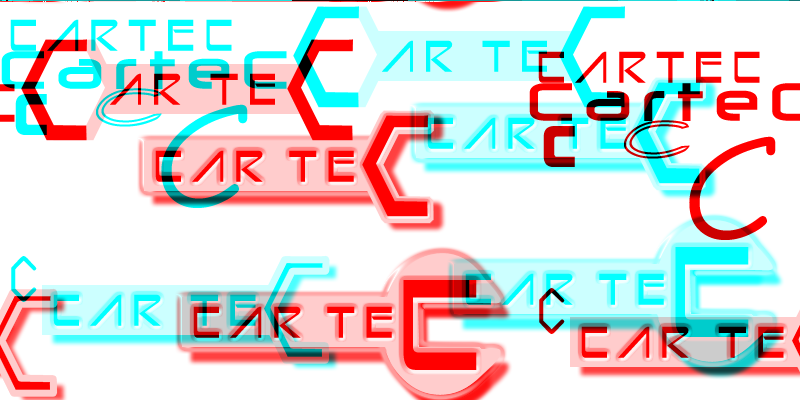
<style>
.page{position:relative;width:800px;height:400px;background:#ffffff}
.page>*{position:absolute;margin:0}
.t1{font:48px "AstronBoy";letter-spacing:0.2em;color:#00ffff}
.t2{font:60px "Neuropolitical";letter-spacing:0.2em}
.t3{font:60px "Embargo";letter-spacing:0.2em}
.t4{font:60px "DendriticVoltage";letter-spacing:0.2em}
.t5{font:150px "Enviro-Regular";letter-spacing:0.2em}
.t6{font:48px "AstronBoy";letter-spacing:0.2em}
.t7{font:140px "AstronBoy";letter-spacing:0.2em}
.t8{font:60px "Plasmatic";letter-spacing:0.2em}
</style>
<div class="page">
<p class="t1" style="left:10px;top:18px;width:222px;height:32px">CARTEC</p>
<p class="t1" style="left:382px;top:39px;width:165px;height:32px">AR TE</p>
<p class="t2" style="left:1px;top:50px;width:286px;height:38px">CarteC</p>
<p class="t3" style="left:96px;top:87px;width:66px;height:39px">C</p>
<p class="t4" style="left:15px;top:93px;width:32px;height:41px">C</p>
<p class="t5" style="left:161px;top:103px;width:87px;height:104px">C</p>
<p class="t6" style="left:427px;top:116px;width:199px;height:32px">CAR TE</p>
<p class="t7" style="left:675px;top:246px;width:74px;height:90px">C</p>
<p class="t8" style="left:11px;top:255px;width:26px;height:46px">C</p>
<p class="t6" style="left:465px;top:272px;width:199px;height:32px">CAR TE</p>
<p class="t6" style="left:53px;top:293px;width:203px;height:32px">CAR TE</p>
</div>
